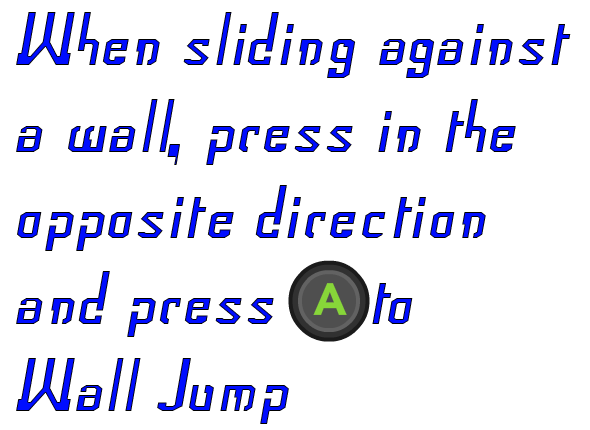
<style>
.page{position:relative;width:590px;height:430px;background:#ffffff}
.page>*{position:absolute;margin:0}
.t1{font:72px "Frak-Regular";color:#000dff}
</style>
<div class="page">
<p class="t1" style="left:16px;top:12px;width:555px;height:412px">When sliding against<br>a wall, press in the<br>opposite direction<br>and press     to<br>Wall Jump</p>
</div>
